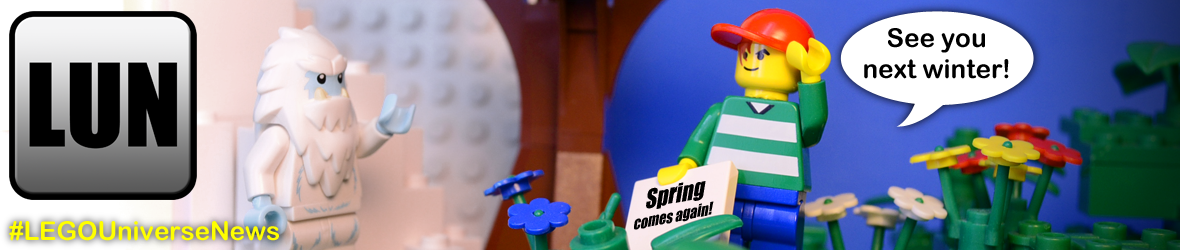
<style>
.page{position:relative;width:1180px;height:250px}
.page>*{position:absolute;margin:0}
.t1{font:25.9px "ArialRoundedMTBold";color:#000000}
.t2{font:16.4px "Impact";color:#000000;scale:0.88 1}
.t3{font:25.1px "Impact";color:#000000;scale:0.88 1}
.t4{font:25.9px "ArialRoundedMTBold";color:#ffff00}
</style>
<div class="page">
<p class="t1" style="left:864px;top:28px;width:145px;height:51px;text-align:center">See you<br>next winter!</p>
<p class="t2" style="left:634px;top:181px;width:80px;height:49px;text-align:center;rotate:-11deg"><span class="t3">Spring</span> <br>comes again!</p>
<p class="t4" style="left:9px;top:221px;width:270px;height:20px">#LEGOUniverseNews</p>
</div>
